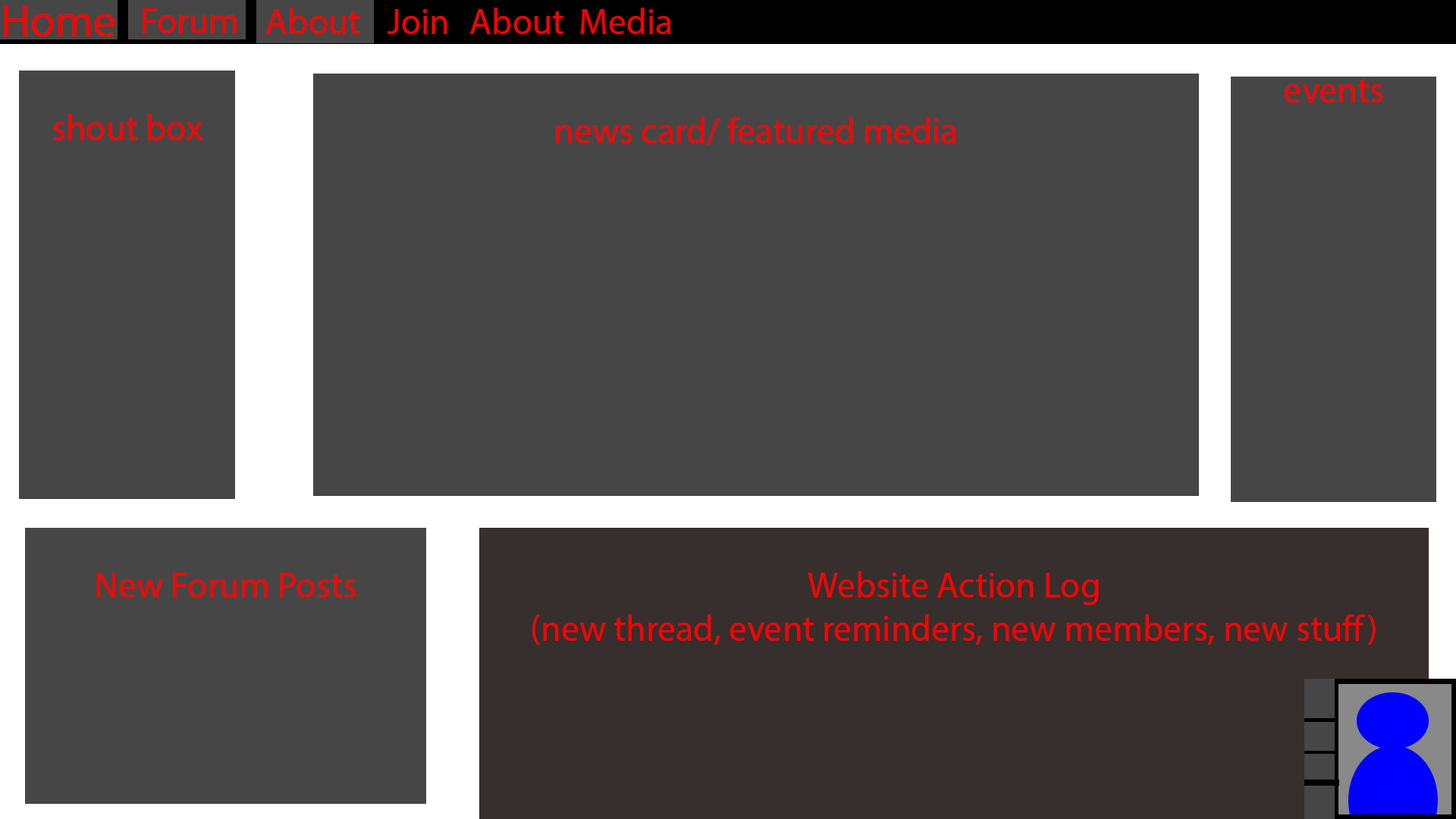
<style>
.page{position:relative;width:1456px;height:819px;background:#464646}
.page>*{position:absolute;margin:0}
.t1{font:45.5px "MyriadPro-Regular";color:#ff0000}
.t2{font:36.4px "MyriadPro-Regular";color:#ff0000}
</style>
<div class="page">
<p class="t1" style="left:4px;top:5px;width:111px;height:31px">Home</p>
<p class="t2" style="left:143px;top:8px;width:94px;height:25px">Forum</p>
<p class="t2" style="left:266px;top:8px;width:93px;height:26px">About</p>
<p class="t2" style="left:388px;top:8px;width:283px;height:26px">Join About Media</p>
<p class="t2" style="left:1285px;top:79px;width:97px;height:23px">events</p>
<p class="t2" style="left:53px;top:114px;width:149px;height:26px">shout box</p>
<p class="t2" style="left:556px;top:117px;width:400px;height:28px">news card/ featured media</p>
<p class="t2" style="left:97px;top:573px;width:259px;height:25px">New Forum Posts</p>
<p class="t2" style="left:532px;top:571px;width:844px;height:74px;text-align:center">Website Action Log<br>(new thread, event reminders, new members, new stuff)</p>
</div>
